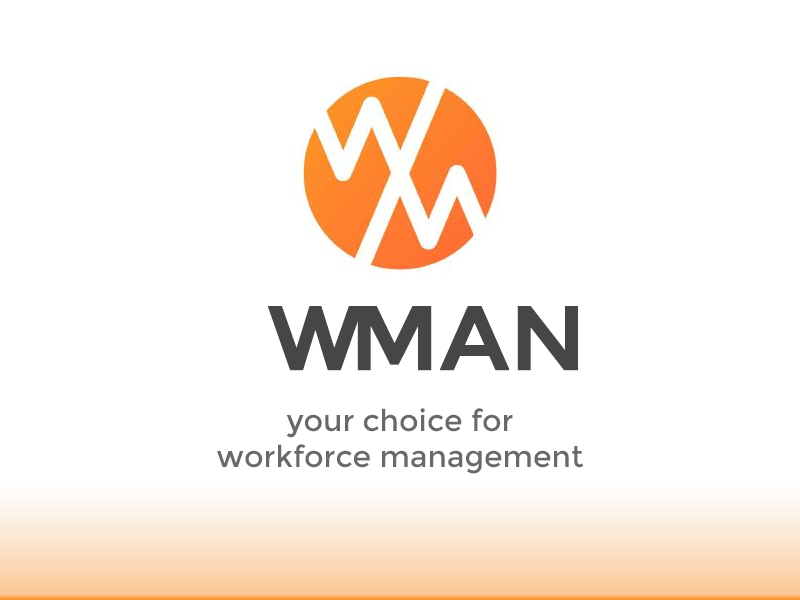
<style>
.page{position:relative;width:800px;height:600px;background:#ffffff}
.page>*{position:absolute;margin:0}
.t1{font:90px "Montserrat-Regular";color:#474747;text-transform:uppercase;font-weight:bold}
.t2{font:30px "Montserrat-Regular";color:#696969}
</style>
<div class="page">
<p class="t1" style="left:268px;top:306px;width:310px;height:65px">WMan</p>
<p class="t2" style="left:217px;top:408px;width:367px;height:66px;text-align:center">your choice for<br>workforce management</p>
</div>
